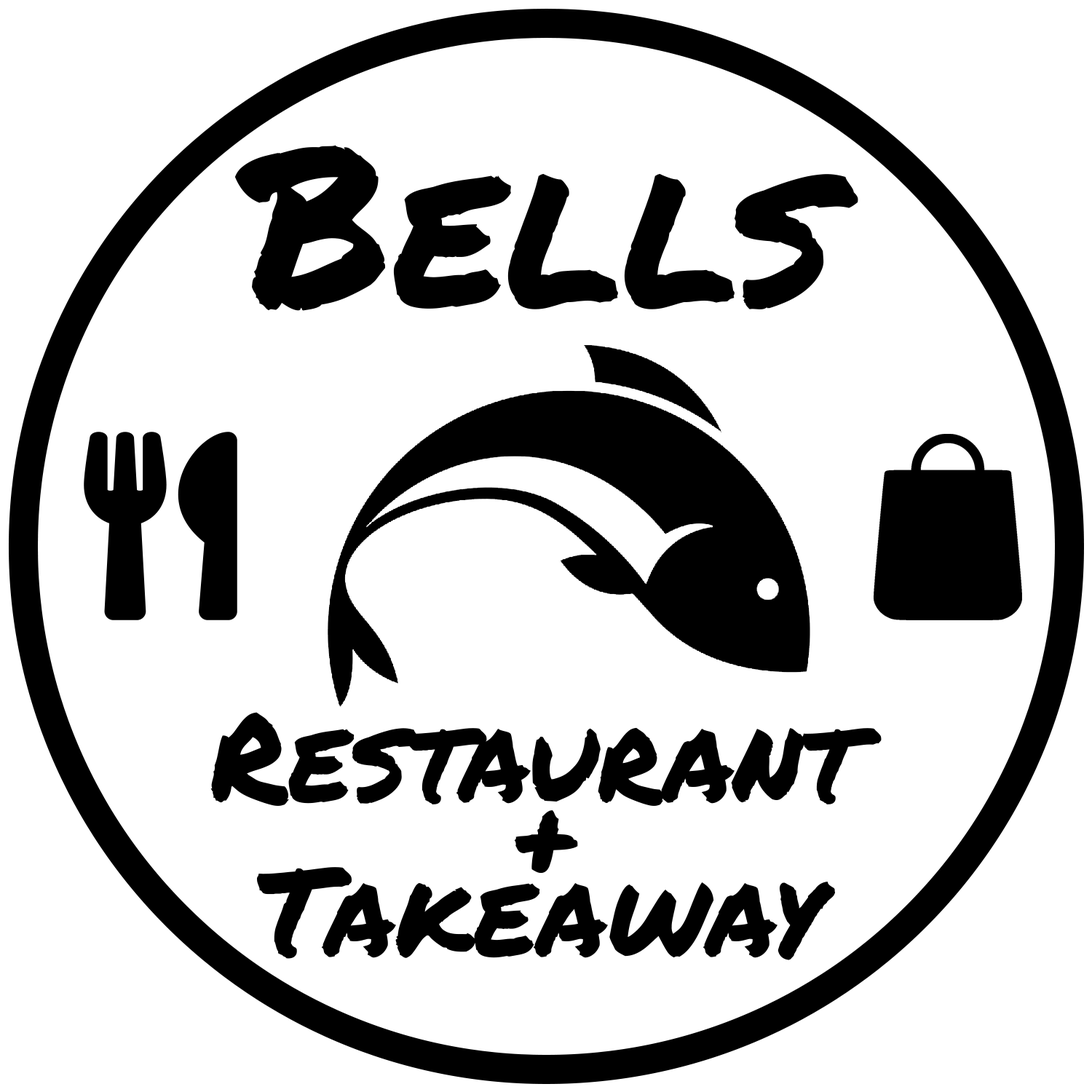
<style>
.page{position:relative;width:1092px;height:1092px;background:#ffffff}
.page>*{position:absolute;margin:0}
.t1{font:218.4px "PermanentMarker-Regular";color:#000000}
.t2{font:121.3px "PermanentMarker-Regular";color:#000000}
</style>
<div class="page">
<p class="t1" style="left:234px;top:145px;width:624px;height:166px">Bells</p>
<p class="t2" style="left:210px;top:712px;width:672px;height:94px">Restaurant</p>
<p class="t2" style="left:514px;top:810px;width:64px;height:64px">+</p>
<p class="t2" style="left:257px;top:867px;width:578px;height:93px">Takeaway</p>
</div>
